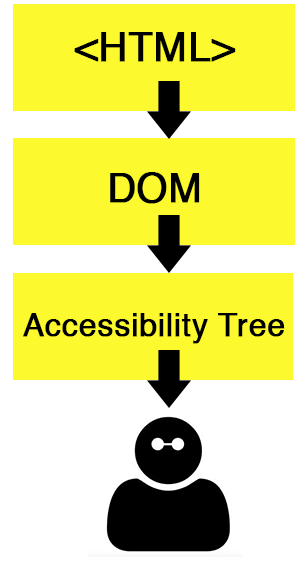
<style>
.page{position:relative;width:305px;height:564px;background:#fcfa2e}
.page>*{position:absolute;margin:0}
.t1{font:39.6px "Helvetica";letter-spacing:0.005em;color:#000000;font-weight:bold}
.t2{font:31.7px "Helvetica";letter-spacing:0.005em;color:#000000;font-weight:bold}
</style>
<div class="page">
<p class="t1" style="left:74px;top:32px;width:162px;height:30px">&lt;HTML&gt;</p>
<p class="t1" style="left:110px;top:172px;width:90px;height:32px">DOM</p>
<p class="t2" style="left:23px;top:313px;width:262px;height:31px">Accessibility Tree</p>
</div>
